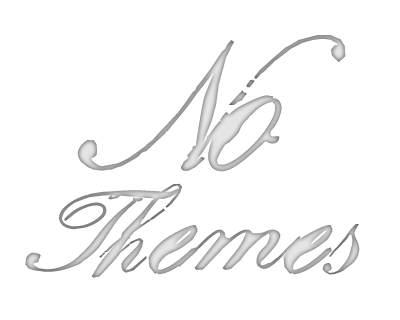
<style>
.page{position:relative;width:400px;height:320px;background:#ffffff}
.page>*{position:absolute;margin:0}
.t1{font:79.5px "ChatoBandSmooth-Bold";scale:1.09 1}
.t2{font:129.2px "ChatoBandSmooth-Bold";scale:1.09 1}
</style>
<div class="page">
<p class="t1" style="left:25px;top:35px;width:335px;height:243px;text-align:center"><span class="t2">No<br></span>Themes</p>
</div>
